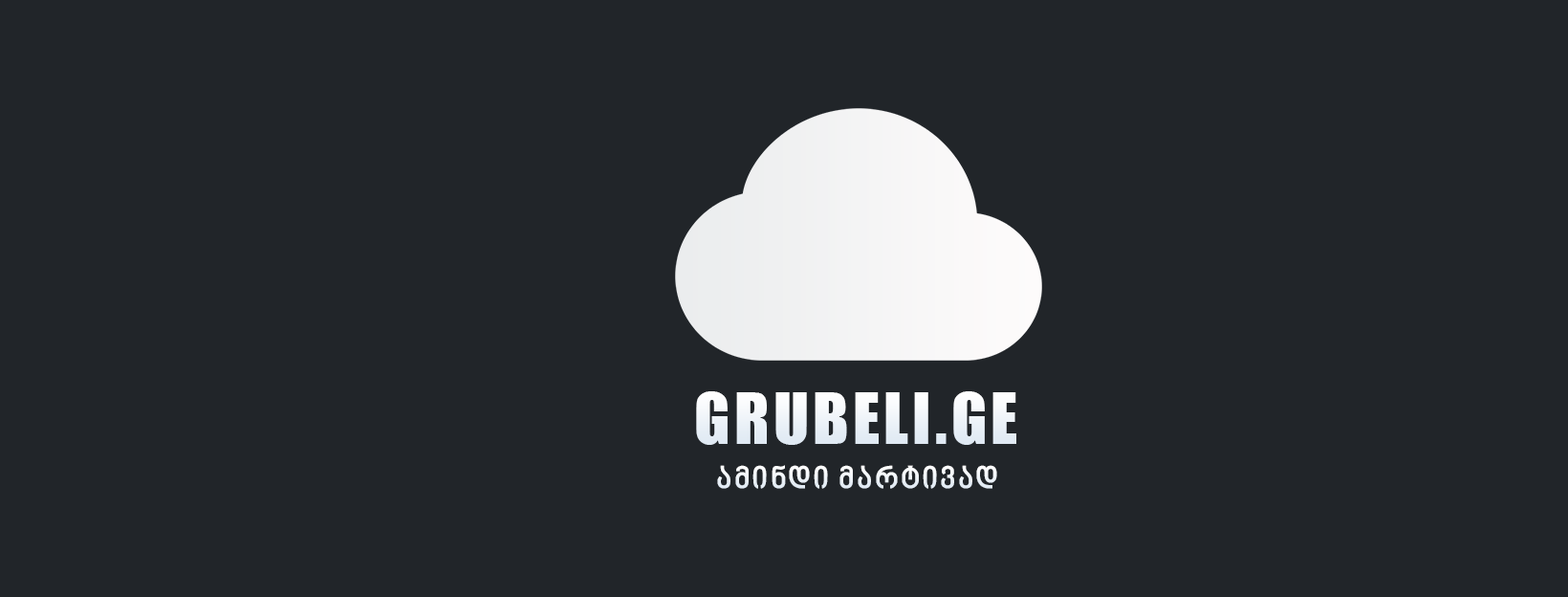
<style>
.page{position:relative;width:1568px;height:597px;background:#212529}
.page>*{position:absolute;margin:0}
.t1{font:65.1px "Impact";letter-spacing:0.06em;color:#eff4f9}
.t2{font:30.7px "BPGNinoMtavruli-Bold";letter-spacing:0.06em;color:#f1f5fa}
</style>
<div class="page">
<p class="t1" style="left:696px;top:391px;width:320px;height:54px">GRUBELI.GE</p>
<p class="t2" style="left:717px;top:465px;width:280px;height:24px">ამინდი მარტივად</p>
</div>
